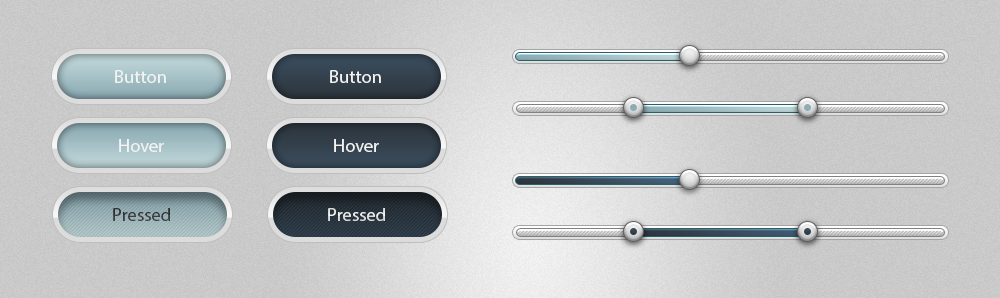
<style>
.page{position:relative;width:1000px;height:298px}
.page>*{position:absolute;margin:0}
.t1{font:18.4px "MyriadPro-Regular";color:#f3f3f3}
</style>
<div class="page">
<p class="t1" style="left:115px;top:70px;width:51px;height:13px">Button</p>
<p class="t1" style="left:330px;top:70px;width:51px;height:13px">Button</p>
<p class="t1" style="left:119px;top:139px;width:45px;height:13px">Hover</p>
<p class="t1" style="left:334px;top:139px;width:45px;height:13px">Hover</p>
<p class="t1" style="left:328px;top:208px;width:57px;height:13px">Pressed</p>
</div>
